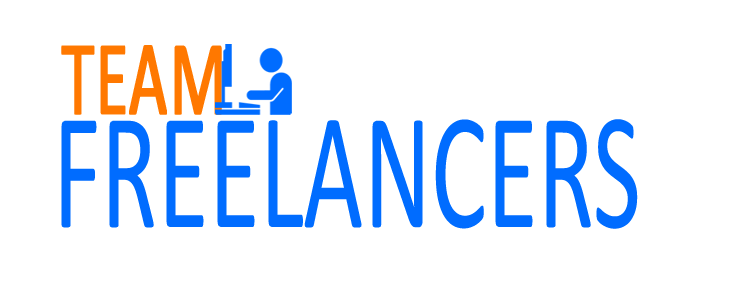
<style>
.page{position:relative;width:734px;height:281px;background:#ffffff}
.page>*{position:absolute;margin:0}
.t1{font:107px "Calibri";color:#ff7800;font-weight:bold;scale:0.62 1}
.t2{font:168.4px "Calibri";color:#006cff;text-transform:uppercase;scale:0.62 1}
</style>
<div class="page">
<p class="t1" style="left:61px;top:45px;width:161px;height:70px">TEAM</p>
<p class="t2" style="left:61px;top:119px;width:577px;height:110px">freelancers</p>
</div>
